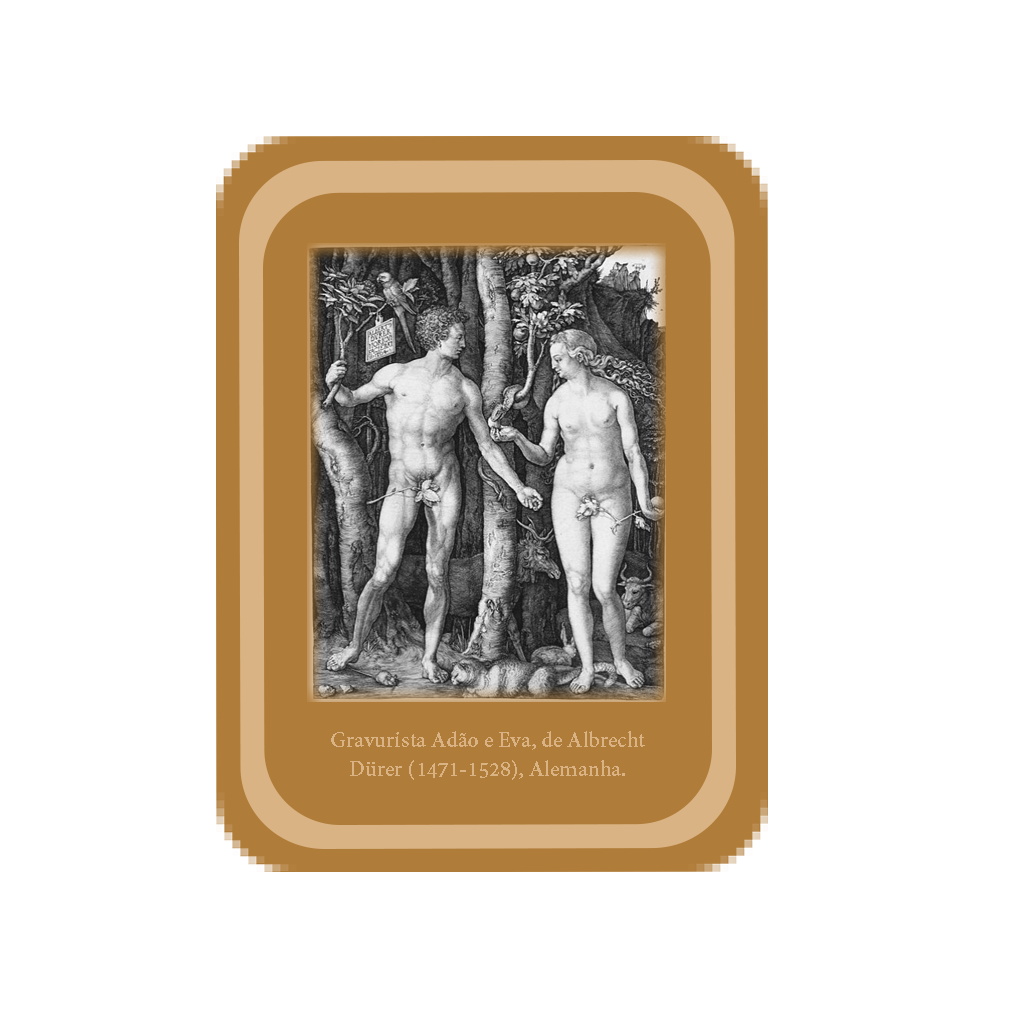
<style>
.page{position:relative;width:1024px;height:1024px;background:#ffffff}
.page>*{position:absolute;margin:0}
.t1{font:24.2px "AdobeDevanagari-Bold";color:#d9b383}
</style>
<div class="page">
<p class="t1" style="left:331px;top:731px;width:314px;height:49px;text-align:center">Gravurista Adão e Eva, de Albrecht Dürer (1471-1528), Alemanha.</p>
</div>
